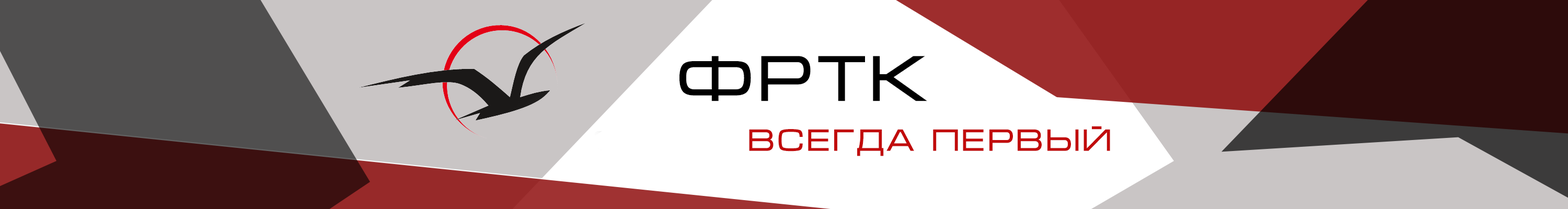
<style>
.page{position:relative;width:1568px;height:209px;background:#ffffff}
.page>*{position:absolute;margin:0}
.t1{font:65.2px "Micra";color:#000000}
.t2{font:31.4px "Micra";color:#c10b0b}
</style>
<div class="page">
<p class="t1" style="left:679px;top:56px;width:248px;height:45px">ФРТК</p>
<p class="t2" style="left:749px;top:126px;width:361px;height:30px">ВСЕГДА ПЕРВЫЙ</p>
</div>
